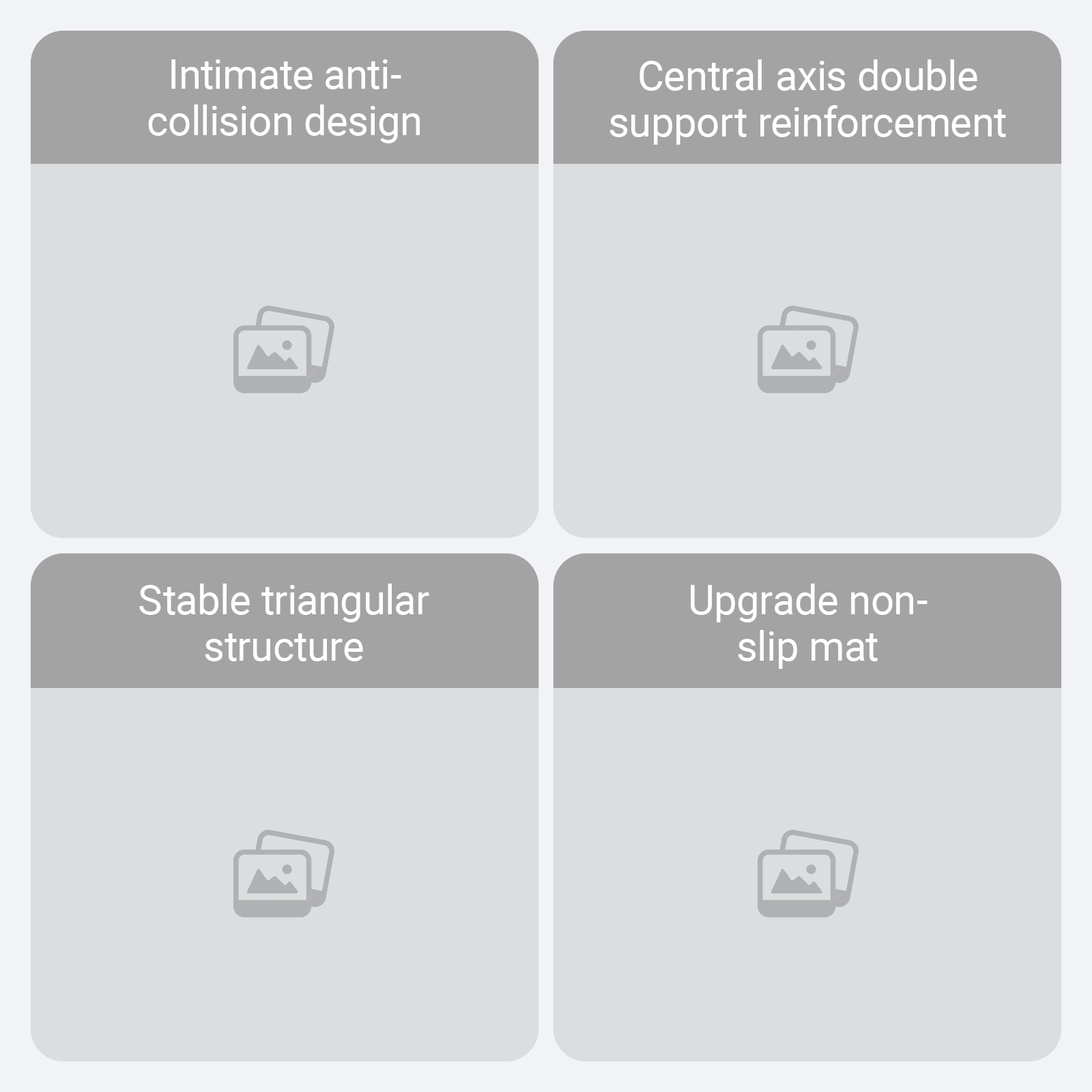
<style>
.page{position:relative;width:1092px;height:1092px;background:#dcdddf}
.page>*{position:absolute;margin:0}
.t1{font:40.8px/46.6px "Roboto-Regular";color:#ffffff}
</style>
<div class="page">
<p class="t1" style="left:148px;top:59px;width:272px;height:84px;text-align:center">Intimate anti-<br>collision design</p>
<p class="t1" style="left:609px;top:59px;width:397px;height:86px;text-align:center">Central axis double<br>support reinforcement</p>
<p class="t1" style="left:139px;top:584px;width:290px;height:77px;text-align:center">Stable triangular<br>structure</p>
<p class="t1" style="left:691px;top:584px;width:237px;height:85px;text-align:center">Upgrade non-<br>slip mat</p>
</div>
